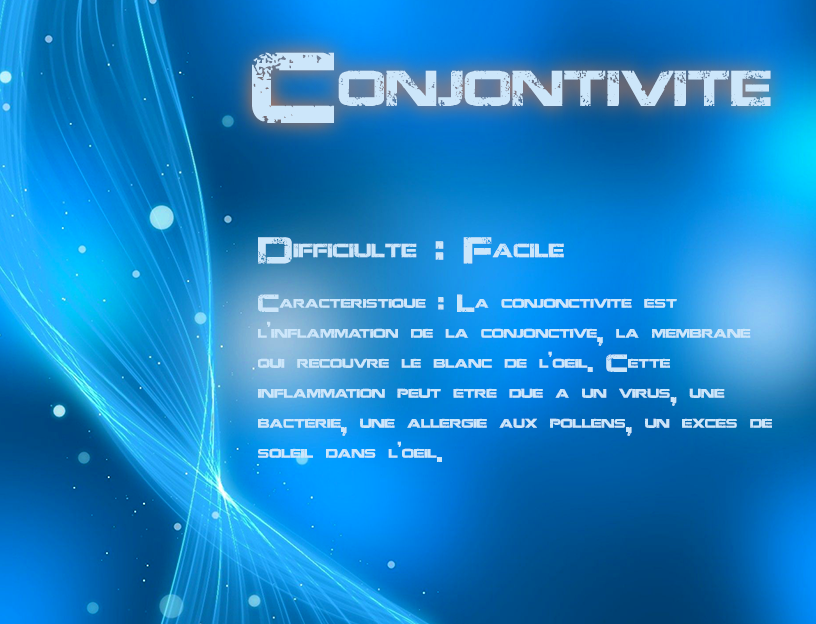
<style>
.page{position:relative;width:816px;height:624px}
.page>*{position:absolute;margin:0}
.t1{font:100px "JacintoSans";color:#cce6fa}
.t2{font:37.5px "JacintoSans";color:#cce6fa}
.t3{font:25px "JacintoSans";color:#cce6fa}
</style>
<div class="page">
<p class="t1" style="left:252px;top:52px;width:519px;height:71px">Conjontivite</p>
<p class="t2" style="left:258px;top:237px;width:306px;height:27px">Difficiulte : Facile</p>
<p class="t3" style="left:258px;top:294px;width:514px;height:168px">Caracteristique : La conjonctivite est l’inflammation de la conjonctive, la membrane qui recouvre le blanc de l’oeil. Cette inflammation peut etre due a un virus, une bacterie, une allergie aux pollens, un exces de soleil dans l’oeil.</p>
</div>
